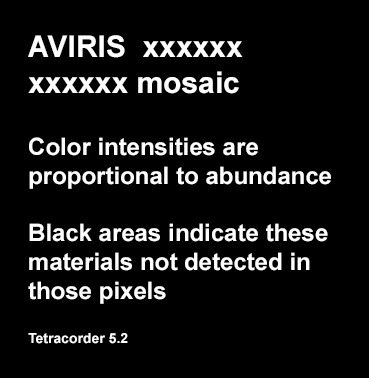
<style>
.page{position:relative;width:369px;height:378px;background:#000000}
.page>*{position:absolute;margin:0}
.t1{font:30px "Arial-BoldMT";color:#ffffff}
.t2{font:24px "Arial-BoldMT";color:#fffefe}
.t3{font:14px "Arial-BoldMT";color:#fffefe}
</style>
<div class="page">
<p class="t1" style="left:28px;top:35px;width:215px;height:59px">AVIRIS  xxxxxx<br>xxxxxx mosaic</p>
<p class="t2" style="left:28px;top:137px;width:303px;height:167px">Color intensities are <br>proportional to abundance<br><br>Black areas indicate these <br>materials not detected in <br>those pixels</p>
<p class="t3" style="left:28px;top:333px;width:100px;height:11px">Tetracorder 5.2</p>
</div>
